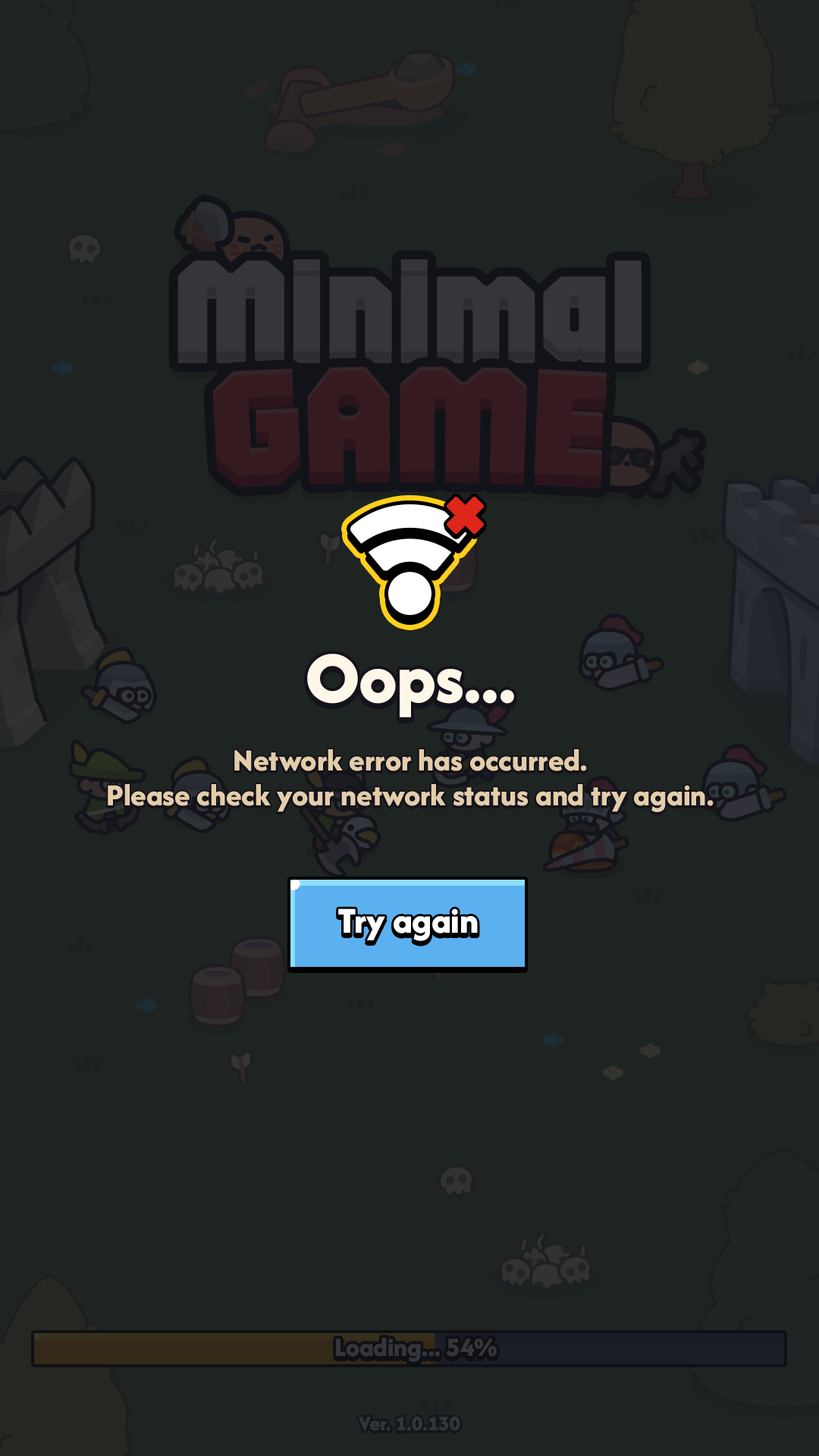
<style>
.page{position:relative;width:819px;height:1456px;background:#1e2422}
.page>*{position:absolute;margin:0}
.t1{font:75.8px "AfacadFlux-ExtraBold";color:#fff8e9}
.t2{font:31.8px/34.9px "AfacadFlux-ExtraBold";color:#e3cdaa}
.t3{font:37.9px "AfacadFlux-ExtraBold";color:#ffffff}
</style>
<div class="page">
<p class="t1" style="left:307px;top:654px;width:207px;height:63px">Oops...</p>
<p class="t2" style="left:108px;top:749px;width:606px;height:63px;text-align:center">Network error has occurred.<br>Please check your network status and try again.</p>
<p class="t3" style="left:338px;top:908px;width:140px;height:33px">Try again</p>
</div>
